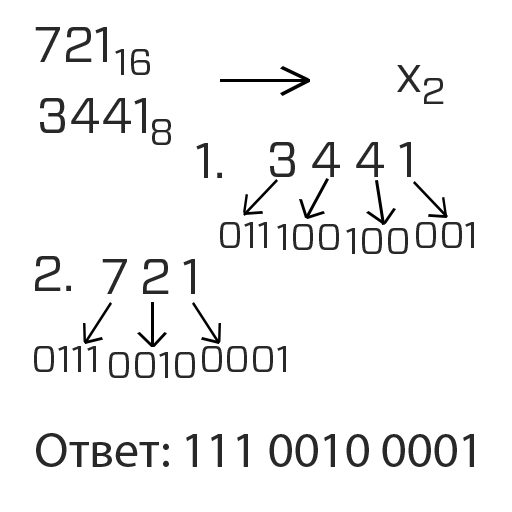
<style>
.page{position:relative;width:512px;height:512px;background:#ffffff}
.page>*{position:absolute;margin:0}
.t1{font:50px "Forza-Book";color:#282828}
.t2{font:37.5px "Forza-Book";color:#282828}
.t3{font:12px "Forza-Book";color:#282828}
.t4{font:50px "MyriadPro-Regular";color:#282828}
</style>
<div class="page">
<p class="t1" style="left:35px;top:27px;width:72px;height:35px">721</p>
<p class="t2" style="left:115px;top:49px;width:35px;height:26px">16</p>
<p class="t1" style="left:397px;top:65px;width:24px;height:27px">x</p>
<p class="t2" style="left:424px;top:78px;width:20px;height:26px">2</p>
<p class="t1" style="left:40px;top:98px;width:106px;height:35px">3441</p>
<p class="t2" style="left:152px;top:119px;width:19px;height:26px">8</p>
<p class="t3" style="left:196px;top:143px;width:26px;height:35px">1.</p>
<p class="t1" style="left:270px;top:142px;width:141px;height:35px">3 4 4 1</p>
<p class="t2" style="left:220px;top:222px;width:47px;height:26px">011</p>
<p class="t2" style="left:416px;top:222px;width:58px;height:26px">001</p>
<p class="t2" style="left:277px;top:224px;width:62px;height:26px">100</p>
<p class="t2" style="left:346px;top:228px;width:62px;height:26px">100</p>
<p class="t1" style="left:35px;top:256px;width:36px;height:35px">2.</p>
<p class="t1" style="left:102px;top:259px;width:93px;height:35px">7 2 1</p>
<p class="t2" style="left:34px;top:346px;width:62px;height:26px">0111</p>
<p class="t2" style="left:109px;top:352px;width:86px;height:26px">0010</p>
<p class="t2" style="left:202px;top:346px;width:84px;height:26px">0001</p>
<p class="t4" style="left:36px;top:433px;width:438px;height:34px">Ответ: 111 0010 0001</p>
</div>
